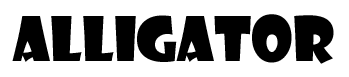
<style>
.page{position:relative;width:349px;height:77px;background:#ffffff}
.page>*{position:absolute;margin:0}
.t1{font:60px "ShowcardGothic-Reg";color:#000000}
</style>
<div class="page">
<p class="t1" style="left:12px;top:14px;width:322px;height:50px">ALLIGATOR</p>
</div>
